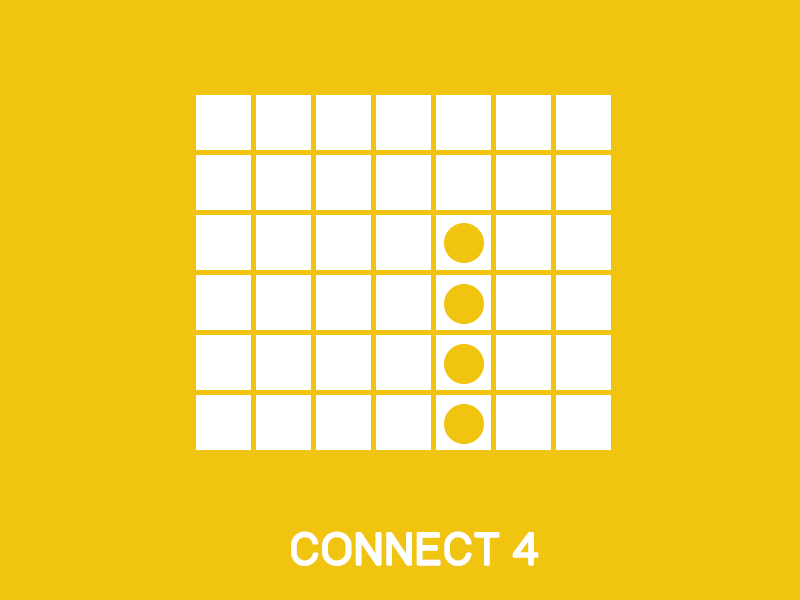
<style>
.page{position:relative;width:800px;height:600px;background:#f1c40f}
.page>*{position:absolute;margin:0}
.t1{font:41.7px "Track";color:#ffffff}
</style>
<div class="page">
<p class="t1" style="left:291px;top:531px;width:248px;height:35px">CONNECT 4</p>
</div>
